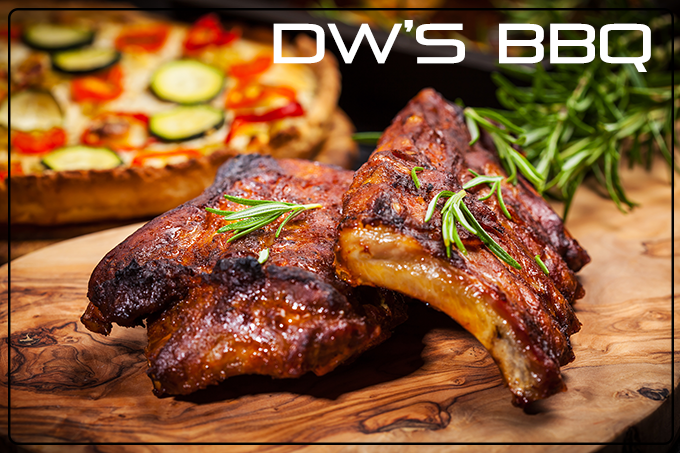
<style>
.page{position:relative;width:680px;height:453px}
.page>*{position:absolute;margin:0}
.t1{font:55.6px "Pirulen";color:#ffffff}
</style>
<div class="page">
<p class="t1" style="left:273px;top:20px;width:378px;height:52px">DW’s BBQ</p>
</div>
